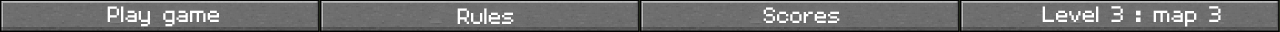
<style>
.page{position:relative;width:1280px;height:32px}
.page>*{position:absolute;margin:0}
.t1{font:20px "VolterGoldfish";color:#ffffff}
</style>
<div class="page">
<p class="t1" style="left:107px;top:6px;width:112px;height:21px">Play game</p>
<p class="t1" style="left:1042px;top:6px;width:179px;height:21px">Level 3 : map 3</p>
<p class="t1" style="left:457px;top:8px;width:57px;height:16px">Rules</p>
<p class="t1" style="left:763px;top:7px;width:77px;height:16px">Scores</p>
</div>
